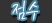
<style>
.page{position:relative;width:52px;height:23px;background:#333333}
.page>*{position:absolute;margin:0}
.t1{font:24px "KCC-eunyoung-Regular";color:#ffffff}
</style>
<div class="page">
<p class="t1" style="left:12px;top:0px;width:26px;height:20px">점수</p>
</div>
